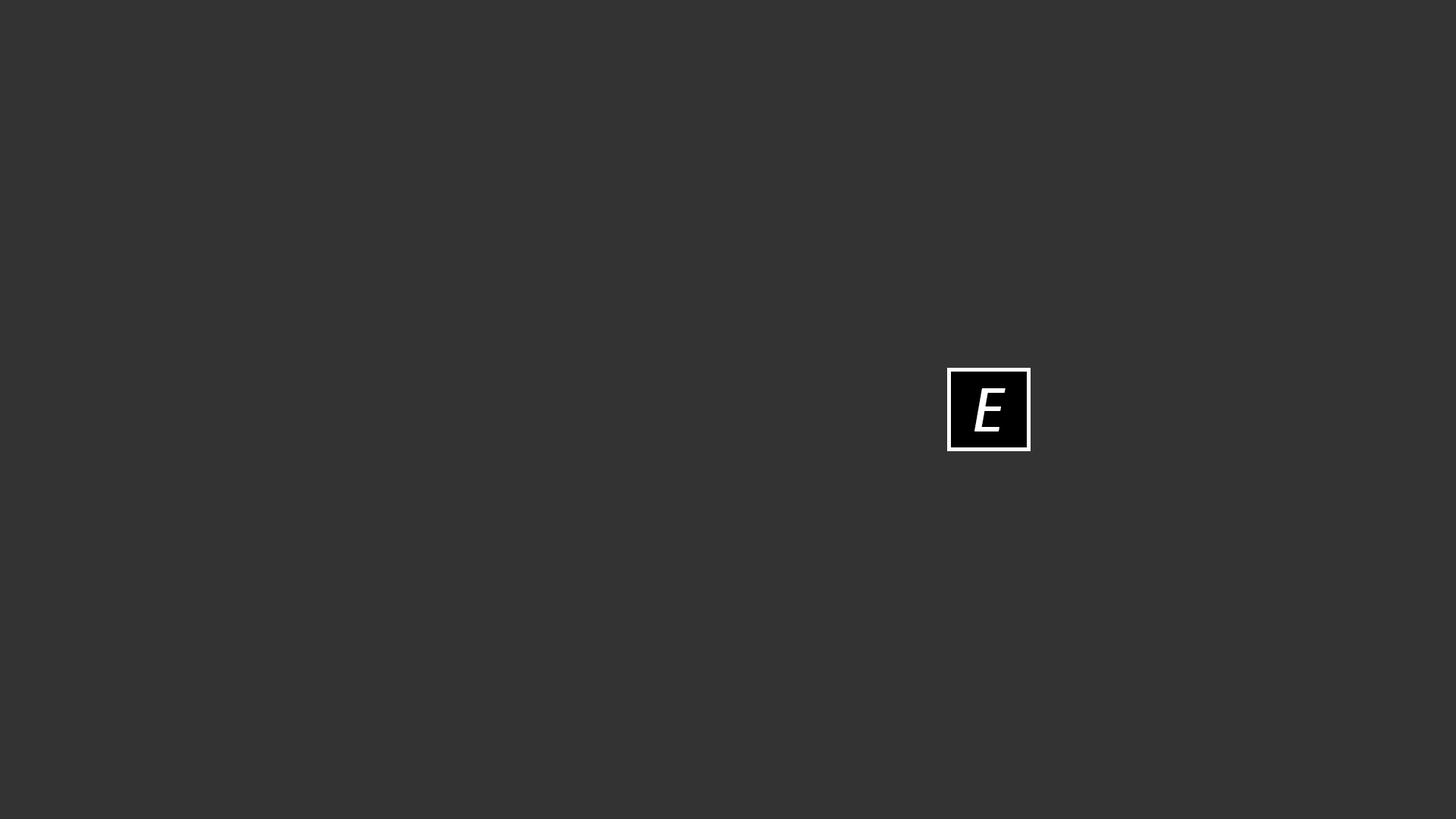
<style>
.page{position:relative;width:1456px;height:819px;background:#333333}
.page>*{position:absolute;margin:0}
.t1{font:55.4px "KozGoPr6N-Regular";color:#ffffff;font-weight:bold;font-style:italic}
</style>
<div class="page">
<p class="t1" style="left:974px;top:388px;width:32px;height:43px">E</p>
</div>
